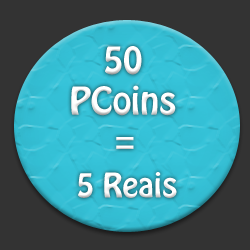
<style>
.page{position:relative;width:250px;height:250px;background:#333333}
.page>*{position:absolute;margin:0}
.t1{font:34px "HoboStd";color:#ffffff}
.t2{font:36px "HoboStd";color:#ffffff}
.t3{font:30px "HoboStd";color:#ffffff}
</style>
<div class="page">
<p class="t1" style="left:71px;top:46px;width:105px;height:70px;text-align:center">50<br>PCoins</p>
<p class="t2" style="left:116px;top:137px;width:18px;height:12px">=</p>
<p class="t3" style="left:78px;top:172px;width:99px;height:26px">5 Reais</p>
</div>
